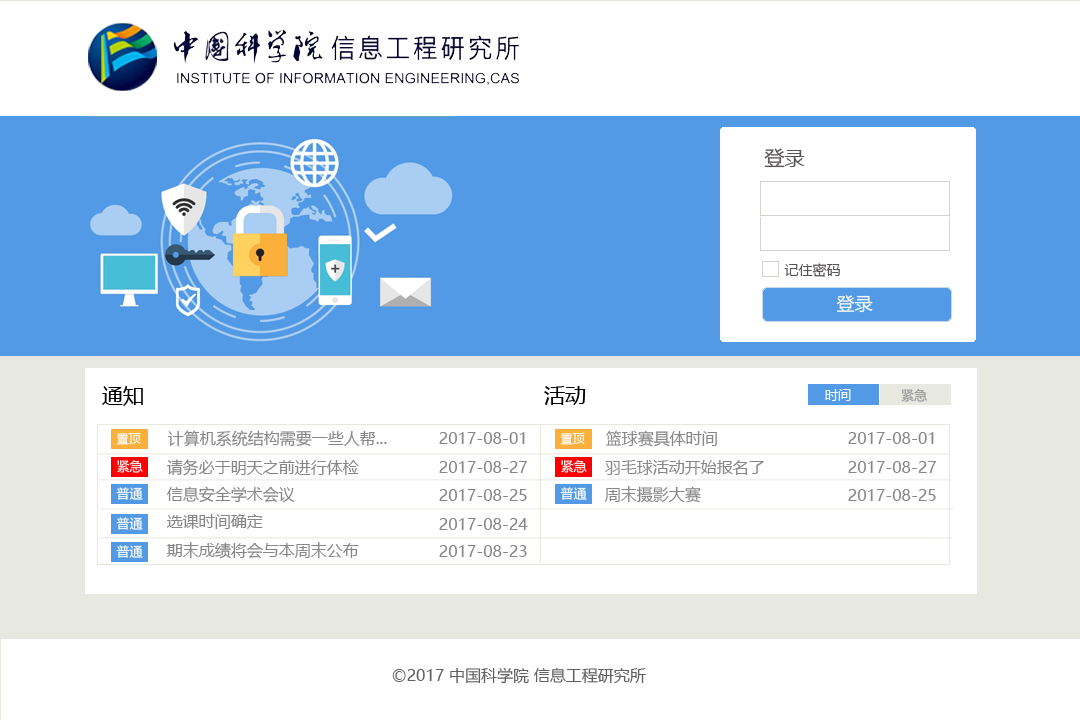
<style>
.page{position:relative;width:1080px;height:720px;background:#ffffff}
.page>*{position:absolute;margin:0}
.t1{font:20px "MicrosoftYaHei";color:#565353}
.t2{font:14px "MicrosoftYaHei";color:#565353}
.t3{font:18px "MicrosoftYaHei";color:#ffffff}
.t4{font:21px "MicrosoftYaHei";color:#000000}
.t5{font:13px "MicrosoftYaHei";color:#ffffff}
.t6{font:13px "MicrosoftYaHei";color:#969696}
.t7{font:12px "MicrosoftYaHei";color:#ffffff}
.t8{font:16px "MicrosoftYaHei";color:#888787}
.t9{font:16px "MicrosoftYaHei";color:#616161}
</style>
<div class="page">
<p class="t1" style="left:764px;top:148px;width:41px;height:20px">登录</p>
<p class="t2" style="left:784px;top:263px;width:56px;height:14px">记住密码</p>
<p class="t3" style="left:836px;top:295px;width:37px;height:18px">登录</p>
<p class="t4" style="left:102px;top:386px;width:41px;height:20px">通知</p>
<p class="t4" style="left:544px;top:386px;width:42px;height:19px">活动</p>
<p class="t5" style="left:825px;top:389px;width:26px;height:12px">时间</p>
<p class="t6" style="left:901px;top:388px;width:26px;height:14px">紧急</p>
<p class="t7" style="left:116px;top:433px;width:25px;height:12px">置顶</p>
<p class="t8" style="left:168px;top:430px;width:219px;height:17px">计算机系统结构需要一些人帮...</p>
<p class="t8" style="left:439px;top:432px;width:86px;height:12px">2017-08-01</p>
<p class="t7" style="left:560px;top:433px;width:25px;height:12px">置顶</p>
<p class="t8" style="left:606px;top:430px;width:111px;height:17px">篮球赛具体时间</p>
<p class="t8" style="left:848px;top:432px;width:86px;height:12px">2017-08-01</p>
<p class="t5" style="left:117px;top:460px;width:26px;height:13px">紧急</p>
<p class="t8" style="left:167px;top:459px;width:192px;height:17px">请务必于明天之前进行体检</p>
<p class="t8" style="left:439px;top:461px;width:88px;height:12px">2017-08-27</p>
<p class="t5" style="left:561px;top:460px;width:26px;height:13px">紧急</p>
<p class="t8" style="left:605px;top:460px;width:159px;height:15px">羽毛球活动开始报名了</p>
<p class="t8" style="left:848px;top:461px;width:88px;height:12px">2017-08-27</p>
<p class="t8" style="left:167px;top:486px;width:128px;height:17px">信息安全学术会议</p>
<p class="t8" style="left:604px;top:486px;width:97px;height:17px">周末摄影大赛</p>
<p class="t5" style="left:116px;top:487px;width:27px;height:13px">普通</p>
<p class="t8" style="left:439px;top:489px;width:88px;height:12px">2017-08-25</p>
<p class="t5" style="left:560px;top:487px;width:27px;height:13px">普通</p>
<p class="t8" style="left:848px;top:489px;width:88px;height:12px">2017-08-25</p>
<p class="t5" style="left:116px;top:517px;width:27px;height:13px">普通</p>
<p class="t8" style="left:167px;top:514px;width:96px;height:15px">选课时间确定</p>
<p class="t8" style="left:439px;top:518px;width:89px;height:12px">2017-08-24</p>
<p class="t5" style="left:116px;top:545px;width:27px;height:13px">普通</p>
<p class="t8" style="left:166px;top:542px;width:193px;height:17px">期末成绩将会与本周末公布</p>
<p class="t8" style="left:439px;top:545px;width:88px;height:12px">2017-08-23</p>
<p class="t9" style="left:392px;top:667px;width:254px;height:17px">©2017 中国科学院 信息工程研究所</p>
</div>
